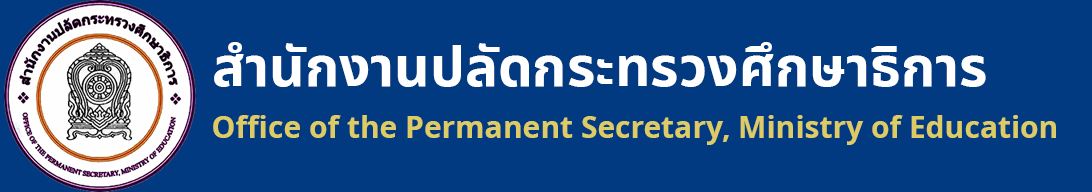
<style>
.page{position:relative;width:1092px;height:192px;background:#023a81}
.page>*{position:absolute;margin:0}
.t1{font:55px "NotoSansThai-Bold";color:#ffffff}
.t2{font:30px "NotoSans-Bold";color:#ddcc66}
</style>
<div class="page">
<p class="t1" style="left:214px;top:42px;width:772px;height:45px">สำนักงานปลัดกระทรวงศึกษาธิการ</p>
<p class="t2" style="left:213px;top:115px;width:843px;height:30px">Office of the Permanent Secretary, Ministry of Education</p>
</div>
